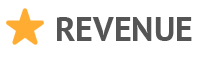
<style>
.page{position:relative;width:210px;height:60px;background:#ffffff}
.page>*{position:absolute;margin:0}
.t1{font:34px "PTSans-Bold";color:#555555}
</style>
<div class="page">
<p class="t1" style="left:57px;top:17px;width:135px;height:24px">REVENUE</p>
</div>
